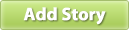
<style>
.page{position:relative;width:129px;height:30px}
.page>*{position:absolute;margin:0}
.t1{font:18px "MyriadPro-Bold";letter-spacing:-0.015em;color:#ffffff;font-weight:bold}
</style>
<div class="page">
<p class="t1" style="left:23px;top:7px;width:83px;height:18px">Add Story</p>
</div>
